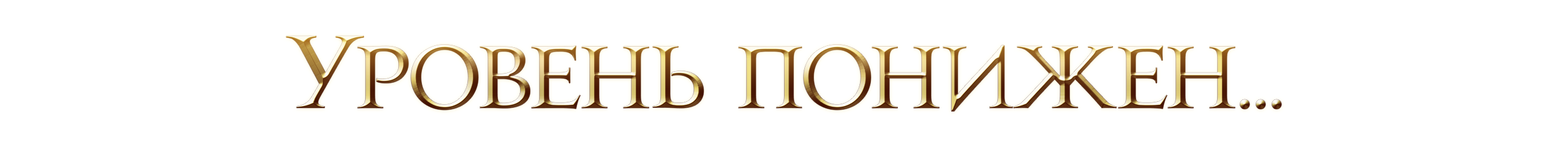
<style>
.page{position:relative;width:1568px;height:157px;background:#ffffff}
.page>*{position:absolute;margin:0}
.t1{font:79.4px "JupiterProRus-Bold";letter-spacing:-0.02em}
.t2{font:94px "JupiterProRus-Bold";letter-spacing:-0.02em}
</style>
<div class="page">
<p class="t1" style="left:286px;top:36px;width:996px;height:75px"><span class="t2">У</span>ровень понижен...</p>
</div>
